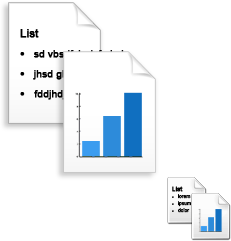
<style>
.page{position:relative;width:231px;height:241px;background:#ffffff}
.page>*{position:absolute;margin:0}
.t1{font:10px/20px "ArialMT";font-weight:bold}
.t2{font:11px/14px "ArialMT";font-weight:bold}
.t3{font:12px/20px "ArialMT";font-weight:bold}
.t4{font:5px/7px "ArialMT";color:#000000}
.t5{font:6px "ArialMT";color:#000000;font-weight:bold}
</style>
<div class="page">
<p class="t1" style="left:20px;top:29px;width:110px;height:71px"><span class="t2">List<br></span><span class="t3">•</span>   sd vbsdfvb dvfvd ele<br><span class="t3">•</span>   jhsd ghg d hdh d sit<br><span class="t3">• </span>  fddjhdjh ffdfsjh d d</p>
<p class="t4" style="left:172px;top:186px;width:19px;height:27px"><span class="t5">List<br></span>•   lorem<br>•   ipsum<br>•   dolor</p>
</div>
